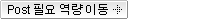
<style>
.page{position:relative;width:200px;height:19px;background:#ffffff}
.page>*{position:absolute;margin:0}
.t1{font:12px "Dotum";letter-spacing:-0.05em;color:#000000}
</style>
<div class="page">
<p class="t1" style="left:8px;top:4px;width:100px;height:11px">Post 필요 역량 이동</p>
</div>
